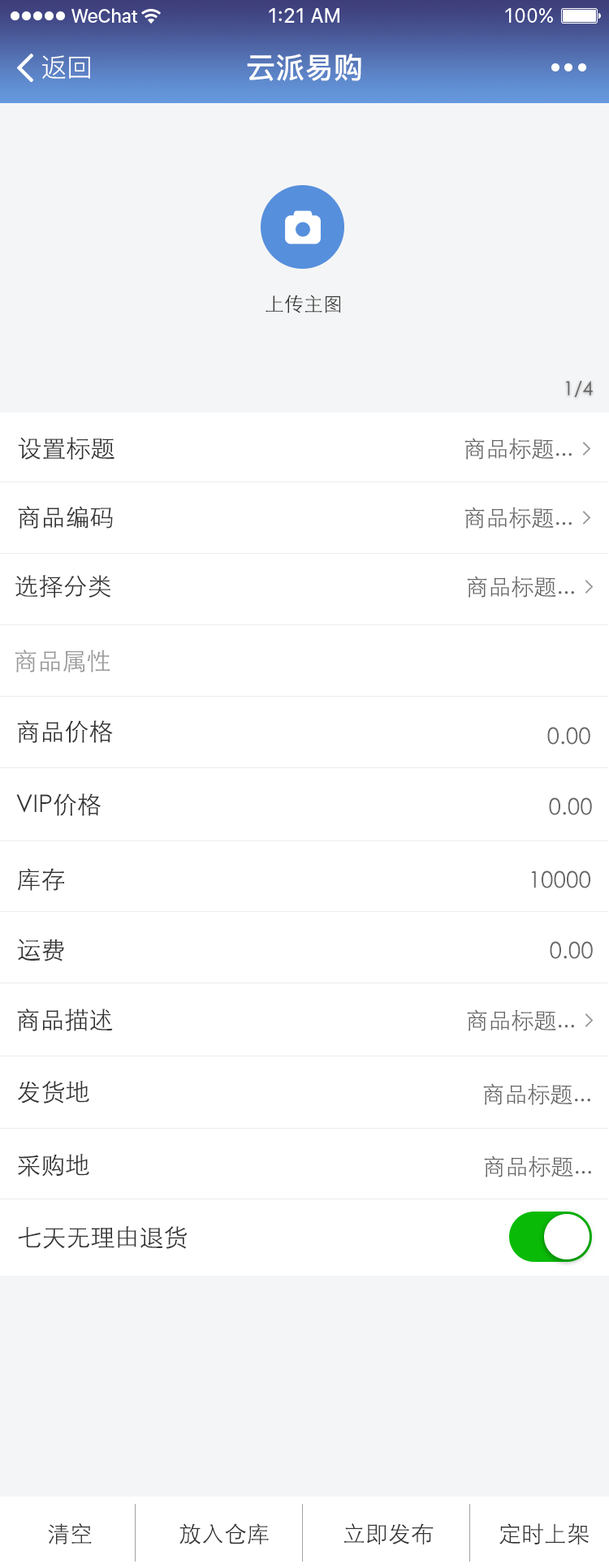
<style>
.page{position:relative;width:609px;height:1568px;background:#ffffff}
.page>*{position:absolute;margin:0}
.t1{font:29.2px "PingFang-SC-Bold";color:#ffffff}
.t2{font:26px "PingFang-SC-Regular";color:#ffffff}
.t3{font:19.5px "STXihei";color:#333333}
.t4{font:19.5px "STXihei";color:#666666}
.t5{font:24.4px "STXihei";color:#333333}
.t6{font:22.7px "STXihei";color:#666666}
.t7{font:24.4px "STXihei";color:#999999}
.t8{font:22.7px "STXihei";color:#333333}
</style>
<div class="page">
<p class="t1" style="left:247px;top:54px;width:114px;height:27px">云派易购</p>
<p class="t2" style="left:42px;top:55px;width:48px;height:24px">返回</p>
<p class="t3" style="left:266px;top:295px;width:74px;height:18px">上传主图</p>
<p class="t4" style="left:565px;top:381px;width:28px;height:16px">1/4</p>
<p class="t5" style="left:18px;top:437px;width:96px;height:23px">设置标题</p>
<p class="t6" style="left:464px;top:438px;width:108px;height:22px">商品标题...</p>
<p class="t5" style="left:18px;top:506px;width:95px;height:23px">商品编码</p>
<p class="t6" style="left:464px;top:507px;width:108px;height:22px">商品标题...</p>
<p class="t5" style="left:15px;top:575px;width:95px;height:23px">选择分类</p>
<p class="t6" style="left:467px;top:576px;width:107px;height:22px">商品标题...</p>
<p class="t7" style="left:15px;top:650px;width:95px;height:22px">商品属性</p>
<p class="t5" style="left:17px;top:720px;width:96px;height:23px">商品价格</p>
<p class="t6" style="left:547px;top:727px;width:43px;height:18px">0.00</p>
<p class="t5" style="left:16px;top:793px;width:85px;height:23px">VIP价格</p>
<p class="t6" style="left:549px;top:797px;width:43px;height:18px">0.00</p>
<p class="t5" style="left:18px;top:868px;width:46px;height:23px">库存</p>
<p class="t6" style="left:531px;top:870px;width:59px;height:18px">10000</p>
<p class="t5" style="left:17px;top:939px;width:47px;height:22px">运费</p>
<p class="t6" style="left:550px;top:941px;width:43px;height:18px">0.00</p>
<p class="t5" style="left:17px;top:1009px;width:96px;height:22px">商品描述</p>
<p class="t6" style="left:467px;top:1009px;width:107px;height:22px">商品标题...</p>
<p class="t5" style="left:17px;top:1080px;width:72px;height:24px">发货地</p>
<p class="t6" style="left:483px;top:1083px;width:107px;height:22px">商品标题...</p>
<p class="t5" style="left:18px;top:1154px;width:71px;height:23px">采购地</p>
<p class="t6" style="left:484px;top:1155px;width:107px;height:22px">商品标题...</p>
<p class="t5" style="left:18px;top:1225px;width:170px;height:24px">七天无理由退货</p>
<p class="t8" style="left:48px;top:1523px;width:44px;height:21px">清空</p>
<p class="t8" style="left:179px;top:1523px;width:90px;height:21px">放入仓库</p>
<p class="t8" style="left:344px;top:1523px;width:90px;height:21px">立即发布</p>
<p class="t8" style="left:499px;top:1523px;width:90px;height:21px">定时上架</p>
</div>
